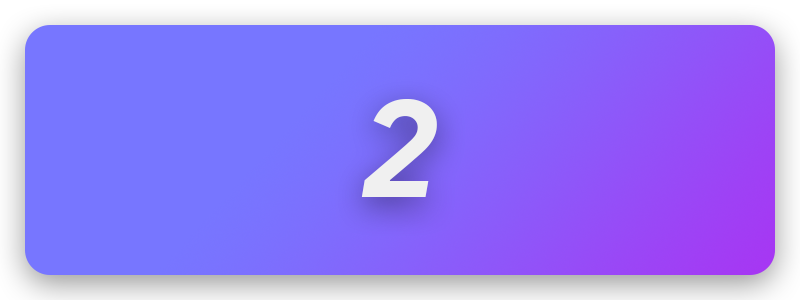
<style>
.page{position:relative;width:800px;height:300px;background:#7776ff}
.page>*{position:absolute;margin:0}
.t1{font:140px "ProductSans-BoldItalic";letter-spacing:0.46em;color:#f0f0f0}
</style>
<div class="page">
<p class="t1" style="left:361px;top:99px;width:76px;height:98px">2</p>
</div>
